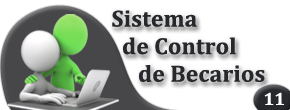
<style>
.page{position:relative;width:290px;height:110px;background:#ffffff}
.page>*{position:absolute;margin:0}
.t1{font:23.6px/27.6px "Cambria-Bold";letter-spacing:0.005em;color:#27282c}
.t2{font:18px "Cambria-Bold";letter-spacing:0.005em;color:#ffffff}
</style>
<div class="page">
<p class="t1" style="left:112px;top:10px;width:153px;height:72px">Sistema <br>  de Control <br>     de Becarios</p>
<p class="t2" style="left:264px;top:92px;width:20px;height:13px">11</p>
</div>
